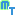
<style>
.page{position:relative;width:16px;height:16px;background:#ffffff}
.page>*{position:absolute;margin:0}
.t1{font:12px "Bauhaus93";letter-spacing:0.05em;color:#3693d9}
</style>
<div class="page">
<p class="t1" style="left:1px;top:1px;width:8px;height:8px">M</p>
<p class="t1" style="left:9px;top:7px;width:6px;height:8px">T</p>
</div>
